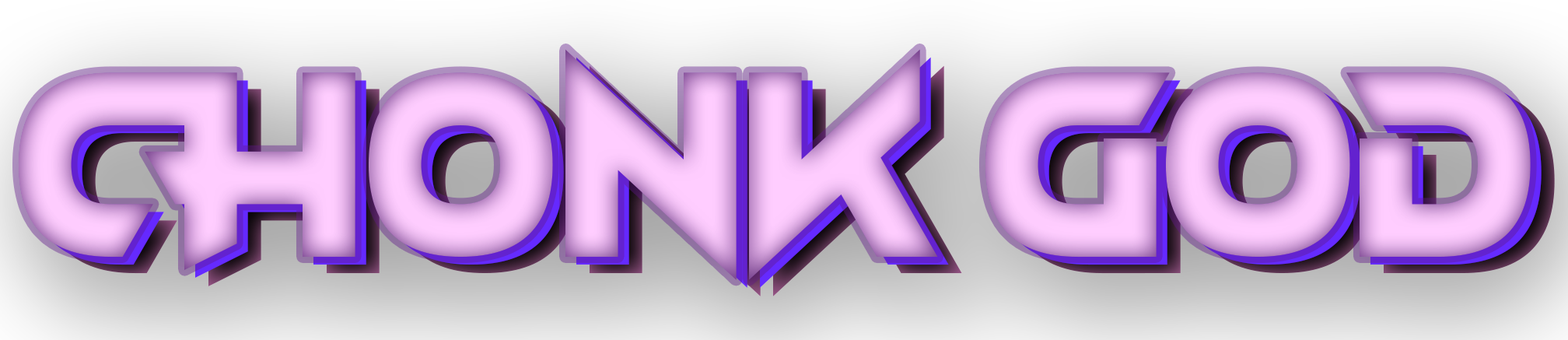
<style>
.page{position:relative;width:1568px;height:340px}
.page>*{position:absolute;margin:0}
.t1{font:269px "FastHand"}
</style>
<div class="page">
<p class="t1" style="left:19px;top:49px;width:1512px;height:231px">CHONK GOD</p>
<p class="t1" style="left:30px;top:57px;width:1512px;height:231px">CHONK GOD</p>
<p class="t1" style="left:43px;top:65px;width:1512px;height:231px">CHONK GOD</p>
</div>
